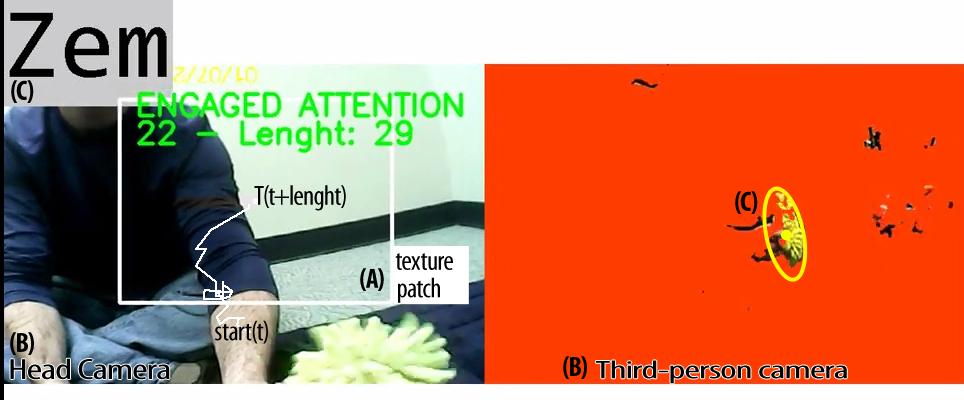
<style>
.page{position:relative;width:964px;height:400px;background:#ff3c00}
.page>*{position:absolute;margin:0}
.t1{font:28px "MyriadPro-BoldCond";letter-spacing:-0.02em;color:#000000}
.t2{font:28px "MyriadPro-Cond";letter-spacing:-0.02em;color:#000000}
.t3{font:28px/27.5px "MyriadPro-Cond";letter-spacing:-0.02em;color:#000000}
.t4{font:29.2px "MyriadPro-Cond";letter-spacing:-0.02em;color:#000000;scale:1.48 1}
.t5{font:25.6px "MyriadPro-Cond";letter-spacing:-0.02em;color:#000000;scale:1.7 1}
</style>
<div class="page">
<p class="t1" style="left:11px;top:80px;width:23px;height:23px">(C)</p>
<p class="t2" style="left:254px;top:185px;width:92px;height:26px">T(t+lenght)</p>
<p class="t1" style="left:735px;top:191px;width:23px;height:23px">(C)</p>
<p class="t3" style="left:395px;top:253px;width:58px;height:50px">texture<br>patch</p>
<p class="t1" style="left:360px;top:268px;width:24px;height:23px">(A)</p>
<p class="t2" style="left:215px;top:320px;width:53px;height:24px">start(t)</p>
<p class="t1" style="left:10px;top:332px;width:24px;height:23px">(B)</p>
<p class="t4" style="left:10px;top:358px;width:160px;height:22px">Head Camera</p>
<p class="t1" style="left:563px;top:356px;width:24px;height:23px">(B)</p>
<p class="t5" style="left:596px;top:360px;width:251px;height:24px">Third-person camera</p>
</div>
